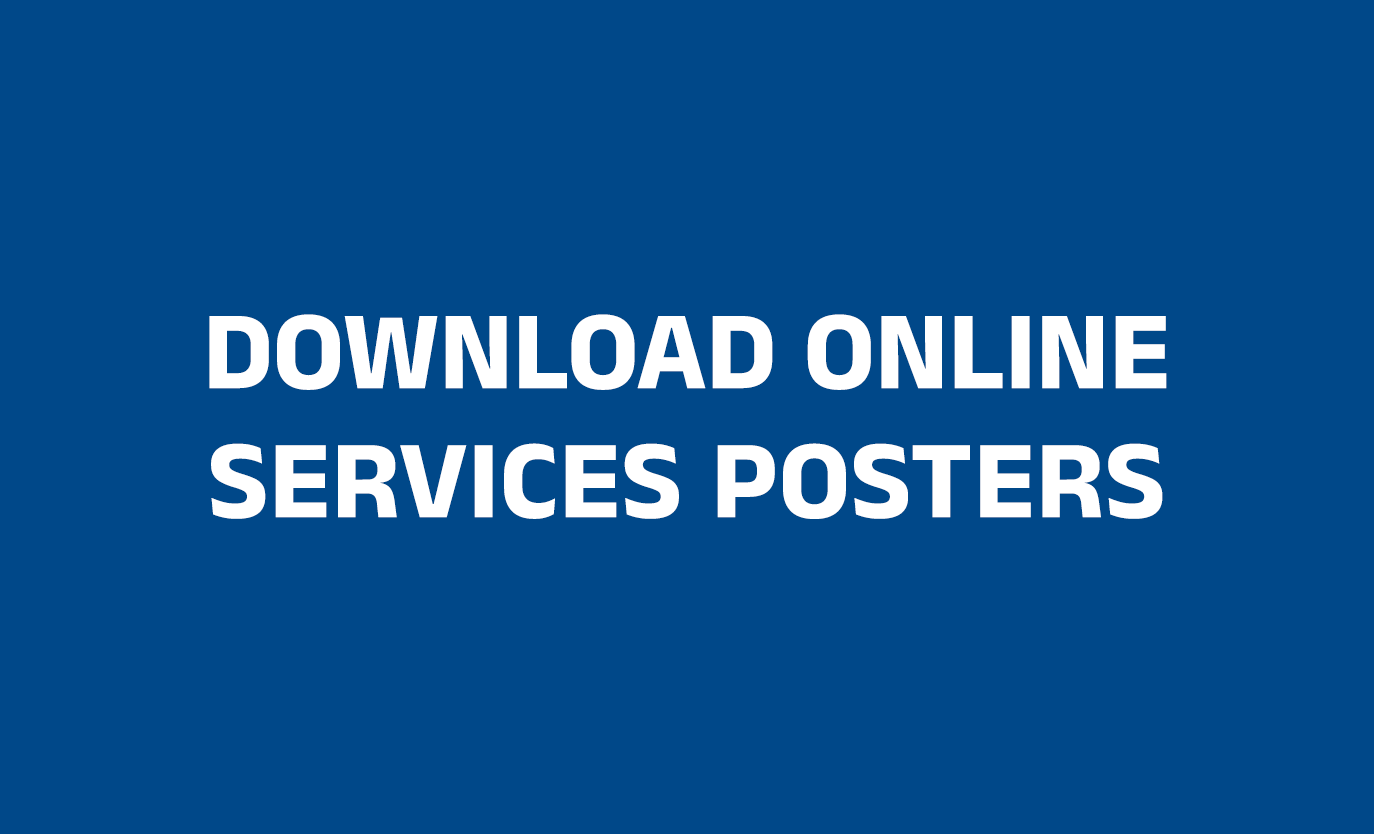
<style>
.page{position:relative;width:1374px;height:834px;background:#004889}
.page>*{position:absolute;margin:0}
.t1{font:112.5px/129.2px "AnekMalayalam-Bold";letter-spacing:0.008em;color:#ffffff;text-transform:uppercase}
.t2{font:112.5px/129.2px "AnekMalayalam-Bold";color:#ffffff;text-transform:uppercase}
</style>
<div class="page">
<p class="t1" style="left:209px;top:314px;width:958px;height:205px;text-align:center"><span class="t2">Download Online<br></span>Services Posters</p>
</div>
